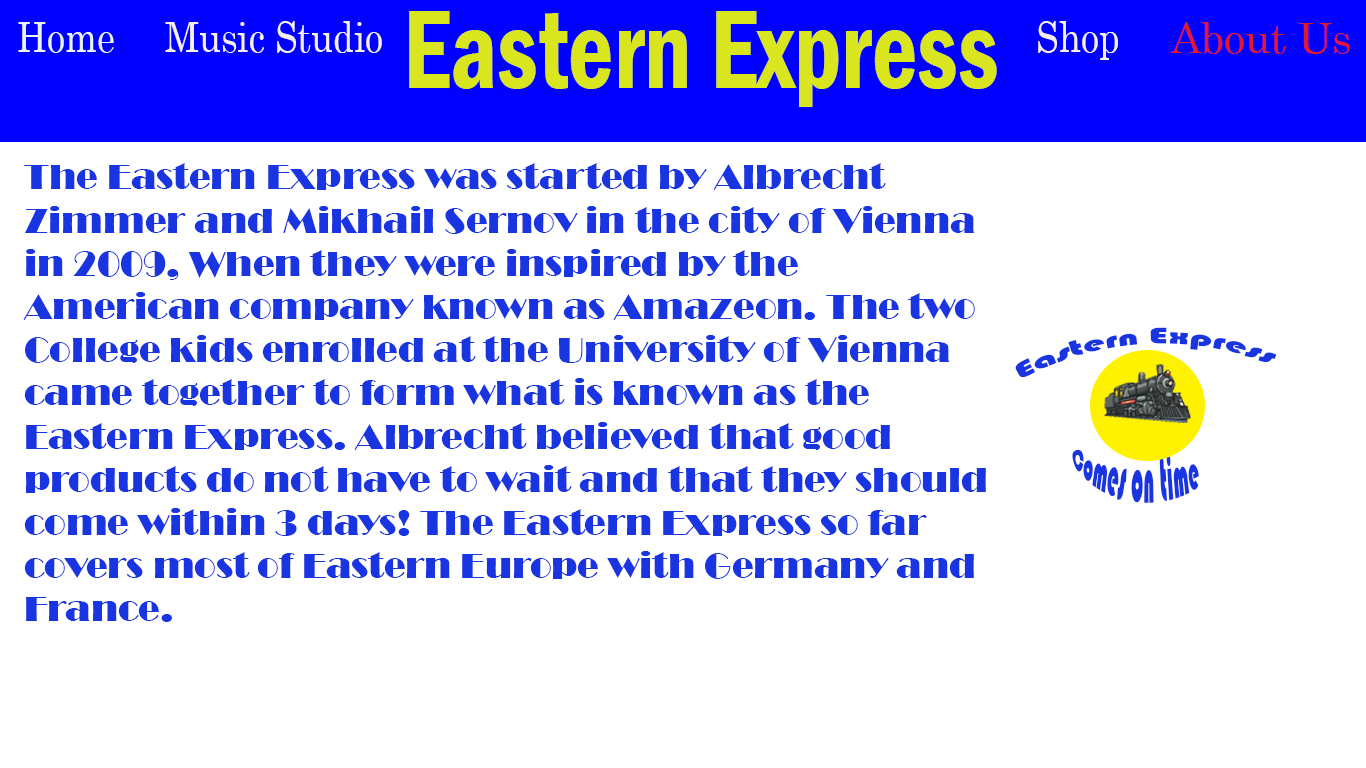
<style>
.page{position:relative;width:1366px;height:768px;background:#ffffff}
.page>*{position:absolute;margin:0}
.t1{font:114.5px "FranklinGothic-DemiCond";color:#d9e51f;scale:0.86 1}
.t2{font:41.6px "Century";color:#eaf3f1;scale:0.86 1}
.t3{font:41.6px "Century";color:#f7eeee;scale:0.86 1}
.t4{font:41.6px "Century";color:#e1192c}
.t5{font:36px "Broadway";color:#1935e1}
.t6{font:23.4px "Bauhaus93";color:#1935e1}
.t7{font:18.7px "Bauhaus93";color:#1935e1}
</style>
<div class="page">
<p class="t1" style="left:409px;top:11px;width:588px;height:96px">Eastern Express</p>
<p class="t2" style="left:18px;top:22px;width:96px;height:31px">Home</p>
<p class="t3" style="left:165px;top:21px;width:217px;height:32px">Music Studio</p>
<p class="t3" style="left:1038px;top:21px;width:80px;height:39px">Shop</p>
<p class="t4" style="left:1170px;top:22px;width:180px;height:32px">About Us</p>
<p class="t5" style="left:23px;top:163px;width:963px;height:459px">The Eastern Express was started by Albrecht Zimmer and Mikhail Sernov in the city of Vienna in 2009, When they were inspired by the American company known as Amazeon. The two College kids enrolled at the University of Vienna came together to form what is known as the Eastern Express. Albrecht believed that good products do not have to wait and that they should come within 3 days! The Eastern Express so far covers most of Eastern Europe with Germany and France.</p>
<p class="t6" style="left:1015px;top:327px;width:262px;height:51px">Eastern Express</p>
<p class="t7" style="left:1072px;top:449px;width:127px;height:54px">Comes on time</p>
</div>
